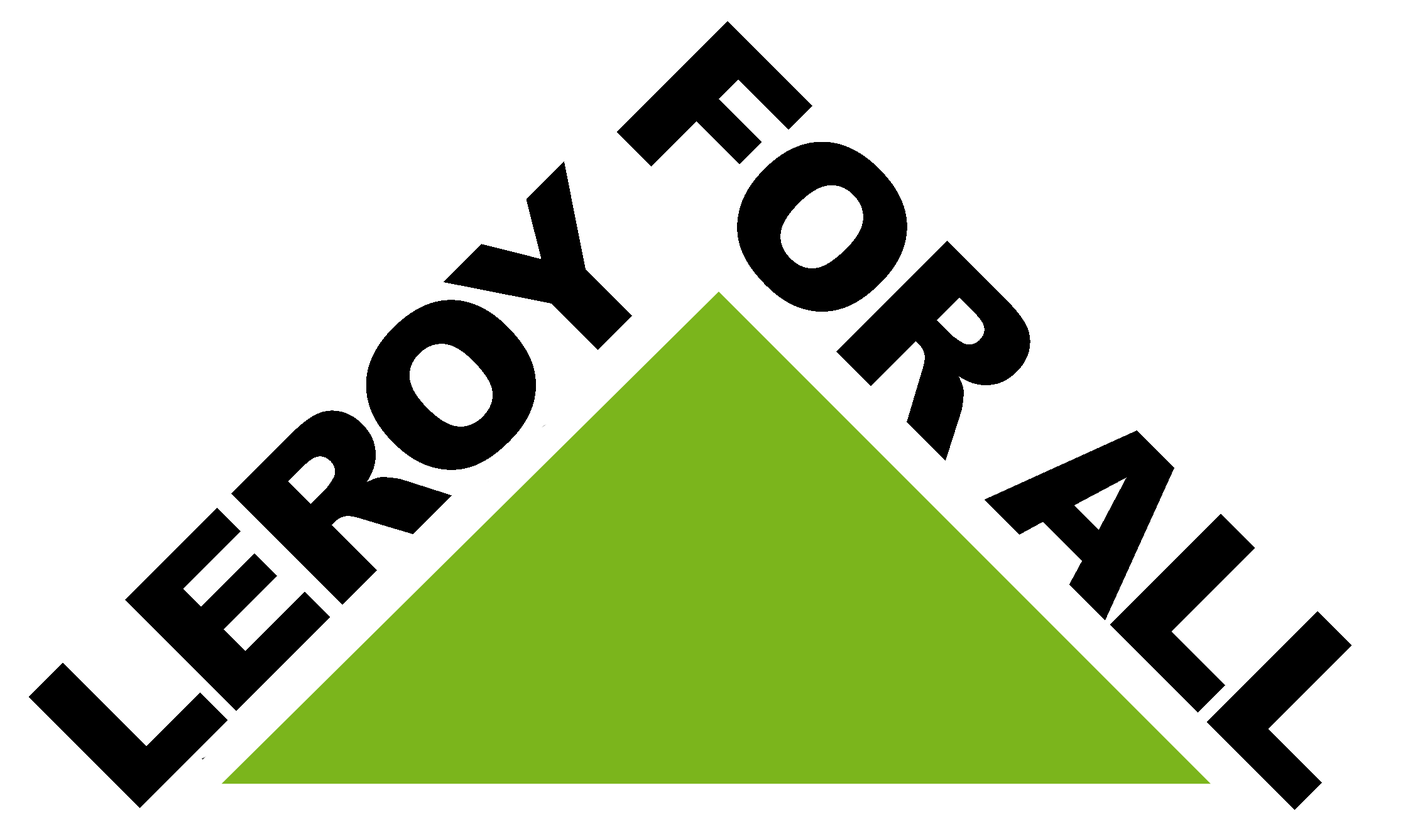
<style>
.page{position:relative;width:1425px;height:837px;background:#ffffff}
.page>*{position:absolute;margin:0}
.t1{font:219px "Arial-Black";letter-spacing:-0.041em;color:#000000}
</style>
<div class="page">
<p class="t1" style="left:617px;top:21px;width:734px;height:789px;rotate:45deg">FOR ALL</p>
<p class="t1" style="left:29px;top:161px;width:603px;height:647px;rotate:-45deg">LEROY</p>
</div>
